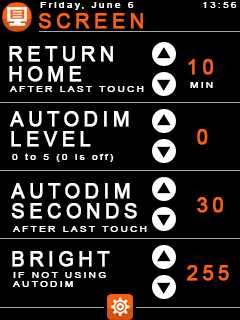
<style>
.page{position:relative;width:240px;height:320px;background:#000000}
.page>*{position:absolute;margin:0}
.t1{font:7.5px "ArialMT";letter-spacing:0.2em;color:#ffffff;font-weight:bold;scale:1.35 1}
.t2{font:20px "ArialMT";letter-spacing:0.2em;color:#ff5f10;font-weight:bold}
.t3{font:20px/20px "ArialMT";letter-spacing:0.2em;color:#ffffff;font-weight:bold}
.t4{font:20px "ArialMT";letter-spacing:0.2em;color:#ffffff;font-weight:bold}
</style>
<div class="page">
<p class="t1" style="left:40px;top:2px;width:197px;height:8px">Friday, June 6             13:56</p>
<p class="t2" style="left:38px;top:13px;width:105px;height:16px">SCREEN</p>
<p class="t3" style="left:9px;top:46px;width:104px;height:36px">RETURN<br>HOME</p>
<p class="t2" style="left:188px;top:59px;width:25px;height:16px">10</p>
<p class="t1" style="left:9px;top:86px;width:135px;height:6px">AFTER LAST TOUCH</p>
<p class="t1" style="left:190px;top:82px;width:23px;height:6px">MIN</p>
<p class="t3" style="left:10px;top:111px;width:119px;height:36px">AUTODIM<br>LEVEL</p>
<p class="t2" style="left:197px;top:129px;width:11px;height:16px">0</p>
<p class="t1" style="left:12px;top:153px;width:102px;height:9px">0 to 5 (0 is off)</p>
<p class="t3" style="left:11px;top:183px;width:126px;height:36px">AUTODIM<br>SECONDS</p>
<p class="t2" style="left:197px;top:197px;width:26px;height:16px">30</p>
<p class="t1" style="left:12px;top:226px;width:135px;height:6px">AFTER LAST TOUCH</p>
<p class="t4" style="left:12px;top:251px;width:98px;height:16px">BRIGHT</p>
<p class="t2" style="left:187px;top:265px;width:42px;height:16px">255</p>
<p class="t1" style="left:12px;top:272px;width:94px;height:15px">IF NOT USING<br>AUTODIM</p>
</div>
